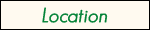
<style>
.page{position:relative;width:150px;height:30px;background:#fffaf0}
.page>*{position:absolute;margin:0}
.t1{font:20px "GeosansLight-Oblique";color:#008135;font-weight:bold}
</style>
<div class="page">
<p class="t1" style="left:42px;top:7px;width:66px;height:16px">Location</p>
</div>
